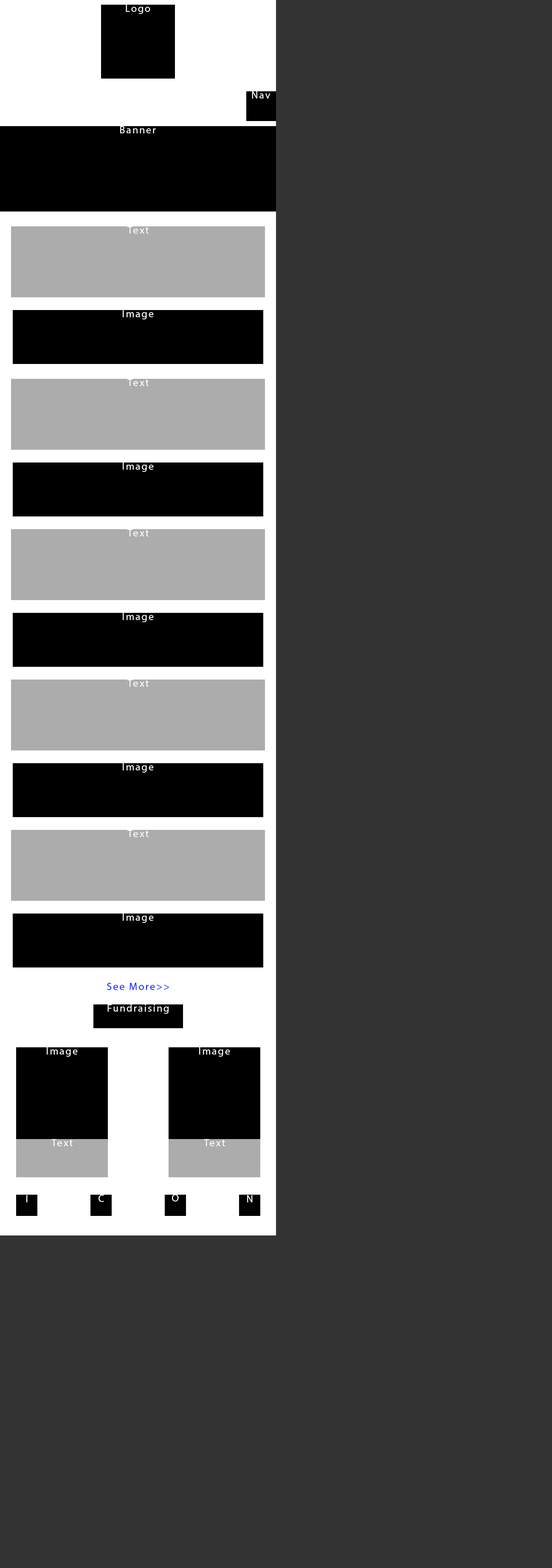
<style>
.page{position:relative;width:552px;height:1568px;background:#333333}
.page>*{position:absolute;margin:0}
.t1{font:10.2px "MyriadPro-Regular";letter-spacing:0.12em;color:#ffffff}
.t2{font:10.2px "MyriadPro-Regular";letter-spacing:0.12em;color:#001eff}
</style>
<div class="page">
<p class="t1" style="left:126px;top:5px;width:24px;height:9px">Logo</p>
<p class="t1" style="left:252px;top:91px;width:19px;height:8px">Nav</p>
<p class="t1" style="left:120px;top:126px;width:36px;height:7px">Banner</p>
<p class="t1" style="left:127px;top:226px;width:22px;height:8px">Text</p>
<p class="t1" style="left:123px;top:310px;width:31px;height:9px">Image</p>
<p class="t1" style="left:127px;top:379px;width:22px;height:7px">Text</p>
<p class="t1" style="left:123px;top:463px;width:31px;height:9px">Image</p>
<p class="t1" style="left:127px;top:529px;width:22px;height:7px">Text</p>
<p class="t1" style="left:123px;top:613px;width:31px;height:9px">Image</p>
<p class="t1" style="left:127px;top:680px;width:22px;height:7px">Text</p>
<p class="t1" style="left:123px;top:763px;width:31px;height:10px">Image</p>
<p class="t1" style="left:127px;top:830px;width:22px;height:7px">Text</p>
<p class="t1" style="left:123px;top:914px;width:31px;height:9px">Image</p>
<p class="t2" style="left:107px;top:983px;width:62px;height:7px">See More&gt;&gt;</p>
<p class="t1" style="left:107px;top:1004px;width:62px;height:10px">Fundraising</p>
<p class="t1" style="left:47px;top:1047px;width:31px;height:10px">Image</p>
<p class="t1" style="left:199px;top:1047px;width:31px;height:10px">Image</p>
<p class="t1" style="left:51px;top:1139px;width:22px;height:7px">Text</p>
<p class="t1" style="left:204px;top:1139px;width:21px;height:7px">Text</p>
<p class="t1" style="left:26px;top:1195px;width:2px;height:7px">I</p>
<p class="t1" style="left:99px;top:1195px;width:5px;height:7px">C</p>
<p class="t1" style="left:172px;top:1194px;width:7px;height:7px">O</p>
<p class="t1" style="left:247px;top:1195px;width:6px;height:7px">N</p>
</div>
